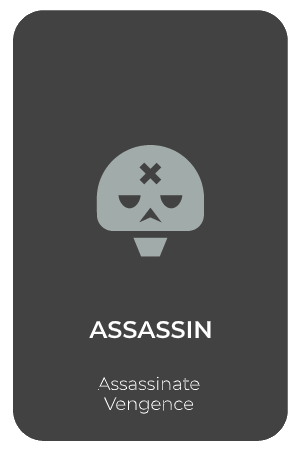
<style>
.page{position:relative;width:301px;height:451px;background:#424243}
.page>*{position:absolute;margin:0}
.t1{font:24px "Montserrat-SemiBold";color:#ffffff}
.t2{font:18px "Montserrat-Light";color:#ffffff}
</style>
<div class="page">
<p class="t1" style="left:89px;top:320px;width:122px;height:19px">ASSASSIN</p>
<p class="t2" style="left:97px;top:376px;width:103px;height:15px">Assassinate</p>
<p class="t2" style="left:104px;top:397px;width:90px;height:17px">Vengence</p>
</div>
